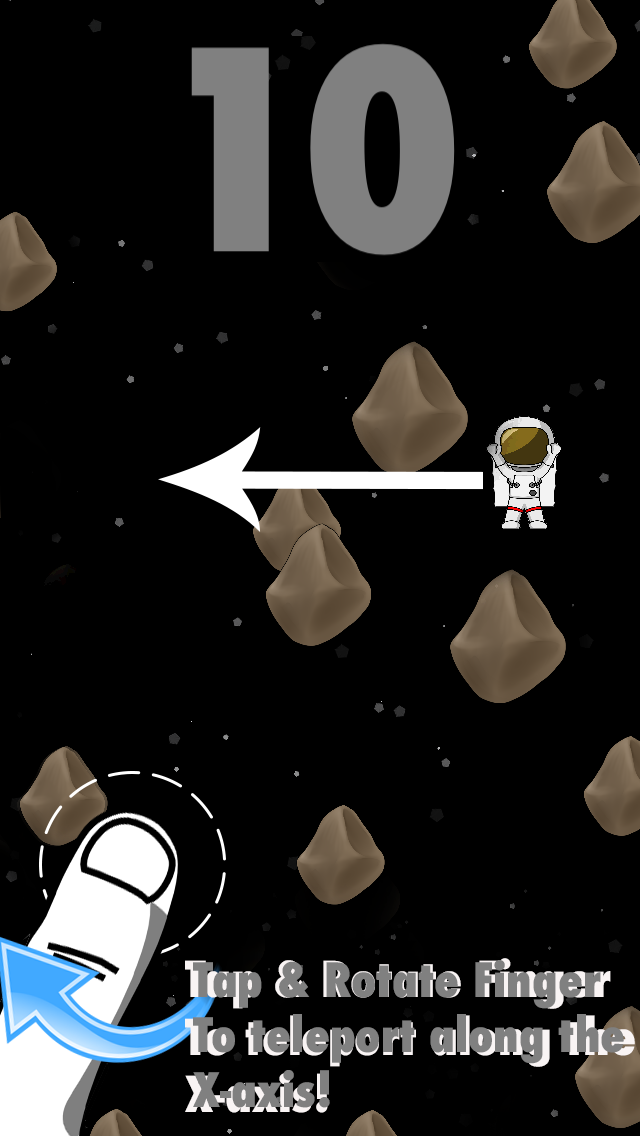
<style>
.page{position:relative;width:640px;height:1136px;background:#000000}
.page>*{position:absolute;margin:0}
.t1{font:48px "Futura-CondensedExtraBold"}
.t2{font:46px "Futura-CondensedExtraBold";color:#808080}
</style>
<div class="page">
<p class="t1" style="left:185px;top:958px;width:450px;height:155px">Tap &amp; Rotate Finger<br>To teleport along the <br>X-axis!</p>
<p class="t2" style="left:193px;top:960px;width:431px;height:148px">Tap &amp; Rotate Finger<br>To teleport along the <br>X-axis!</p>
</div>
